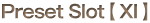
<style>
.page{position:relative;width:150px;height:23px;background:#ffffff}
.page>*{position:absolute;margin:0}
.t1{font:18px "GothicMB101Pro-DeBold";letter-spacing:-0.04em}
.t2{font:18px "GothicMB101Pro-DeBold";letter-spacing:-0.04em;color:#8b6e51}
</style>
<div class="page">
<p class="t1" style="left:2px;top:2px;width:146px;height:19px">Preset Slot【     】</p>
<p class="t2" style="left:119px;top:4px;width:18px;height:15px;opacity:0.9">XI</p>
</div>
